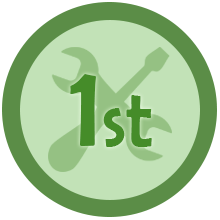
<style>
.page{position:relative;width:220px;height:220px;background:#c2e2b7}
.page>*{position:absolute;margin:0}
.t1{font:80px "BerlinSansFB-Reg";color:#458c29}
.t2{font:120px "BerlinSansFB-Reg";color:#458c29}
</style>
<div class="page">
<p class="t1" style="left:70px;top:74px;width:82px;height:73px"><span class="t2">1</span>st</p>
</div>
